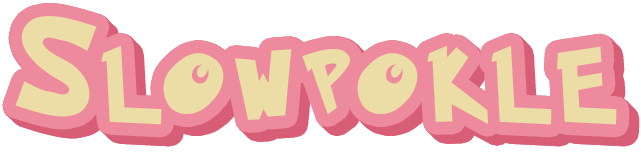
<style>
.page{position:relative;width:641px;height:155px;background:#ffffff}
.page>*{position:absolute;margin:0}
.t1{font:72px "PokemonSolidNormal";color:#ecdca5}
.t2{font:110px "PokemonSolidNormal";color:#ecdca5}
</style>
<div class="page">
<p class="t1" style="left:15px;top:16px;width:602px;height:109px"><span class="t2">S </span>L O W P O K L E</p>
<p class="t1" style="left:15px;top:17px;width:603px;height:109px"><span class="t2">S </span>L O W P O K L E</p>
<p class="t1" style="left:15px;top:16px;width:602px;height:109px"><span class="t2">S </span>L O W P O K L E</p>
<p class="t1" style="left:16px;top:17px;width:602px;height:109px"><span class="t2">S </span>L O W P O K L E</p>
<p class="t1" style="left:16px;top:17px;width:602px;height:109px"><span class="t2">S </span>L O W P O K L E</p>
<p class="t1" style="left:16px;top:17px;width:602px;height:109px"><span class="t2">S </span>L O W P O K L E</p>
<p class="t1" style="left:17px;top:17px;width:602px;height:109px"><span class="t2">S </span>L O W P O K L E</p>
</div>
